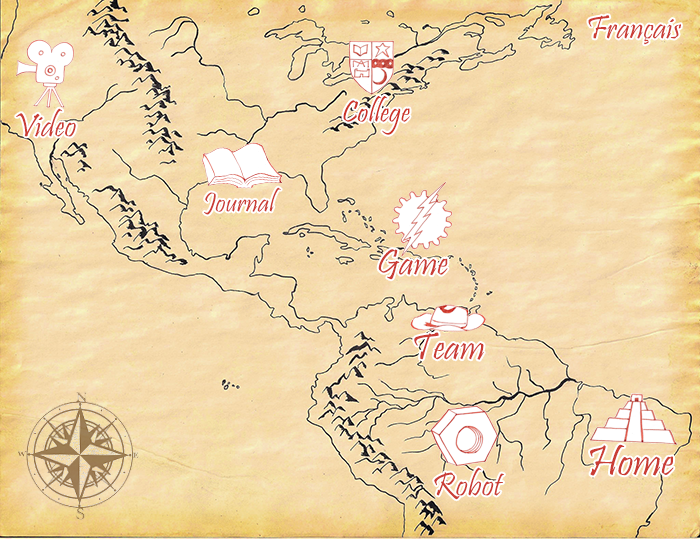
<style>
.page{position:relative;width:700px;height:539px}
.page>*{position:absolute;margin:0}
.t1{font:33.4px "Pristina-Regular";color:#ca3c34}
.t2{font:31px "Pristina-Regular";color:#cc3227}
.t3{font:28.7px "Pristina-Regular";color:#ca3c34}
.t4{font:37.3px "Pristina-Regular";color:#ca3c34}
.t5{font:38.8px "Pristina-Regular";color:#ca3c34}
.t6{font:43.5px "Pristina-Regular";color:#ca3c34}
</style>
<div class="page">
<p class="t1" style="left:588px;top:15px;width:93px;height:30px">Français</p>
<p class="t2" style="left:343px;top:96px;width:67px;height:39px">College</p>
<p class="t1" style="left:16px;top:108px;width:60px;height:29px">Video</p>
<p class="t3" style="left:204px;top:187px;width:77px;height:28px">Journal</p>
<p class="t4" style="left:378px;top:249px;width:70px;height:31px">Game</p>
<p class="t5" style="left:414px;top:332px;width:70px;height:28px">Team</p>
<p class="t6" style="left:590px;top:444px;width:84px;height:32px">Home</p>
<p class="t1" style="left:434px;top:467px;width:70px;height:33px">Robot</p>
</div>
